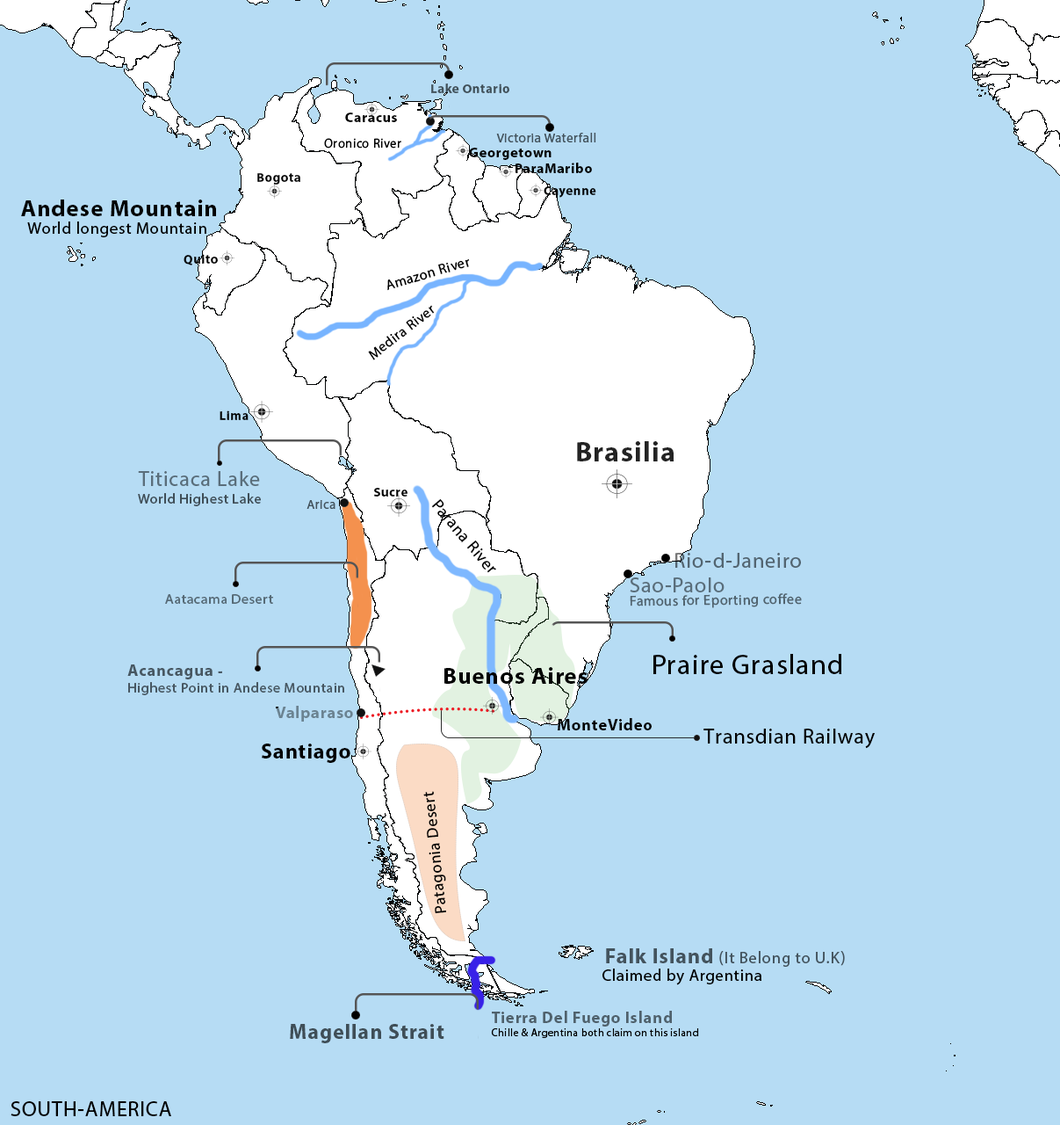
<style>
.page{position:relative;width:1060px;height:1125px;background:#b6dcf4}
.page>*{position:absolute;margin:0}
.t1{font:12.9px "MyriadHebrew-Bold";letter-spacing:0.04em;color:#405059}
.t2{font:14.1px "MyriadHebrew-Bold";letter-spacing:0.04em;color:#000000}
.t3{font:13.3px "MyriadHebrew-Regular";letter-spacing:0.04em;color:#000000;scale:0.95 1}
.t4{font:12.9px "MyriadHebrew-Regular";letter-spacing:0.04em;color:#43535d}
.t5{font:12.9px "MyriadHebrew-Bold";letter-spacing:0.04em;color:#000000}
.t6{font:23.4px "MyriadHebrew-Bold";letter-spacing:0.04em;color:#000000}
.t7{font:16.4px "MyriadHebrew-Regular";letter-spacing:0.04em;color:#000000}
.t8{font:14.1px "MyriadHebrew-Regular";letter-spacing:0.04em;color:#000000}
.t9{font:10.5px "MyriadHebrew-Regular";letter-spacing:0.04em;color:#000000}
.t10{font:28.1px "MyriadHebrew-Bold";letter-spacing:0.04em;color:#232323}
.t11{font:21.1px "MyriadHebrew-Regular";letter-spacing:0.04em;color:#5a6e7b}
.t12{font:14.1px "MyriadHebrew-Regular";letter-spacing:0.04em;color:#3f4e57}
.t13{font:12.9px "MyriadHebrew-Regular";letter-spacing:0.04em;color:#45555f}
.t14{font:21.1px "MyriadHebrew-Regular";letter-spacing:0.04em;color:#536571}
.t15{font:14.1px "MyriadHebrew-Regular";letter-spacing:0.04em;color:#566a76}
.t16{font:14.1px "MyriadHebrew-Regular";letter-spacing:0.04em;color:#50636e}
.t17{font:28.1px "MyriadHebrew-Regular";letter-spacing:0.04em;color:#000000}
.t18{font:14.1px "MyriadHebrew-Regular";letter-spacing:0.04em;color:#475762}
.t19{font:14.1px "MyriadHebrew-Bold";letter-spacing:0.04em;color:#475762}
.t20{font:16.4px "MyriadHebrew-Bold";letter-spacing:0.04em;color:#475762}
.t21{font:16.4px "MyriadHebrew-Bold";letter-spacing:0.04em;color:#6b8391}
.t22{font:16.4px "MyriadHebrew-Bold";letter-spacing:0.04em;color:#000000}
.t23{font:21.1px "MyriadHebrew-Regular";letter-spacing:0.04em;color:#000000}
.t24{font:21.1px "MyriadHebrew-Bold";letter-spacing:0.04em;color:#000000}
.t25{font:15.8px "MyriadHebrew-Regular";letter-spacing:0.04em;color:#000000}
.t26{font:16.4px "MyriadHebrew-Regular";letter-spacing:0.04em;color:#43535d}
.t27{font:21.1px "MyriadHebrew-Bold";letter-spacing:0.04em;color:#43535d}
.t28{font:16.4px "MyriadHebrew-Bold";letter-spacing:0.04em;color:#4f616c}
.t29{font:21.1px "MyriadHebrew-Bold";letter-spacing:0.04em;color:#3f4e57}
</style>
<div class="page">
<p class="t1" style="left:431px;top:83px;width:79px;height:10px">Lake Ontario</p>
<p class="t2" style="left:345px;top:112px;width:52px;height:10px">Caracus</p>
<p class="t3" style="left:324px;top:138px;width:77px;height:10px">Oronico River</p>
<p class="t4" style="left:496px;top:133px;width:101px;height:9px">Victoria Waterfall</p>
<p class="t2" style="left:469px;top:148px;width:83px;height:12px">Georgetown</p>
<p class="t5" style="left:257px;top:173px;width:43px;height:11px">Bogota</p>
<p class="t2" style="left:516px;top:163px;width:76px;height:10px">ParaMaribo</p>
<p class="t5" style="left:544px;top:186px;width:53px;height:12px">Cayenne</p>
<p class="t6" style="left:21px;top:199px;width:195px;height:17px">Andese Mountain</p>
<p class="t7" style="left:27px;top:221px;width:179px;height:16px">World longest Mountain</p>
<p class="t5" style="left:184px;top:254px;width:34px;height:11px">Quito</p>
<p class="t8" style="left:387px;top:258px;width:83px;height:33px;rotate:-16deg">Amazon River</p>
<p class="t9" style="left:368px;top:305px;width:67px;height:55px;rotate:-38deg">Medira River</p>
<p class="t5" style="left:220px;top:410px;width:29px;height:10px">Lima</p>
<p class="t10" style="left:577px;top:441px;width:98px;height:20px">Brasilia</p>
<p class="t11" style="left:138px;top:471px;width:122px;height:15px">Titicaca Lake</p>
<p class="t12" style="left:138px;top:493px;width:123px;height:13px">World Highest Lake</p>
<p class="t5" style="left:374px;top:488px;width:34px;height:8px">Sucre</p>
<p class="t13" style="left:307px;top:500px;width:29px;height:9px">Arica</p>
<p class="t7" style="left:431px;top:499px;width:65px;height:74px;rotate:50deg">Parana River</p>
<p class="t14" style="left:676px;top:553px;width:125px;height:15px">Rio-d-Janeiro</p>
<p class="t11" style="left:630px;top:577px;width:95px;height:15px">Sao-Paolo</p>
<p class="t15" style="left:165px;top:594px;width:108px;height:10px">Aatacama Desert</p>
<p class="t16" style="left:630px;top:593px;width:172px;height:15px;rotate:-1deg">Famous for Eporting coffee</p>
<p class="t17" style="left:654px;top:654px;width:189px;height:20px">Praire Grasland</p>
<p class="t18" style="left:127px;top:664px;width:217px;height:31px"><span class="t19"> </span><span class="t20">Acancagua </span><span class="t19">-<br> </span>Highest Point in Andese Mountain</p>
<p class="t6" style="left:445px;top:667px;width:143px;height:16px">Buenos Aires</p>
<p class="t21" style="left:276px;top:705px;width:77px;height:16px">Valparaso</p>
<p class="t22" style="left:558px;top:718px;width:94px;height:12px">MonteVideo</p>
<p class="t23" style="left:704px;top:728px;width:171px;height:21px">Transdian Railway</p>
<p class="t24" style="left:262px;top:743px;width:89px;height:20px">Santiago</p>
<p class="t25" style="left:423px;top:791px;width:23px;height:122px;rotate:-96deg">Patagonia Desert</p>
<p class="t26" style="left:606px;top:948px;width:239px;height:18px"><span class="t27">Falk Island</span> (It Belong to U.K)</p>
<p class="t7" style="left:603px;top:968px;width:159px;height:17px">Claimed by Argentina</p>
<p class="t28" style="left:492px;top:1010px;width:180px;height:16px">Tierra Del Fuego Island</p>
<p class="t29" style="left:290px;top:1023px;width:155px;height:20px">Magellan Strait</p>
<p class="t9" style="left:491px;top:1028px;width:208px;height:10px">Chille &amp; Argentina both claim on this island</p>
<p class="t23" style="left:11px;top:1101px;width:160px;height:15px">SOUTH-AMERICA</p>
</div>
